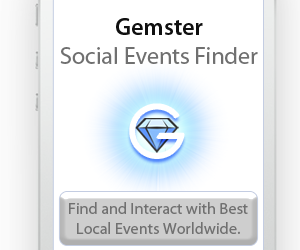
<style>
.page{position:relative;width:300px;height:250px;background:#ffffff}
.page>*{position:absolute;margin:0}
.t1{font:24px "MyriadPro-Regular";color:#707070}
.t2{font:24px "MyriadPro-Semibold";color:#101010}
.t3{font:72px "BelleroseLight";color:#ffffff}
.t4{font:16.2px "MyriadPro-Regular";color:#707070}
</style>
<div class="page">
<p class="t1" style="left:60px;top:18px;width:198px;height:46px;text-align:center"><span class="t2">Gemster<br></span>Social Events Finder</p>
<p class="t3" style="left:130px;top:104px;width:54px;height:54px">G</p>
<p class="t4" style="left:69px;top:202px;width:179px;height:32px;text-align:center">Find and Interact with Best<br>Local Events Worldwide.</p>
</div>
